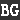
<style>
.page{position:relative;width:20px;height:20px;background:#333333}
.page>*{position:absolute;margin:0}
.t1{font:17px "YouYuan";color:#ffffff;font-weight:bold}
</style>
<div class="page">
<p class="t1" style="left:1px;top:4px;width:18px;height:12px">BG</p>
</div>
